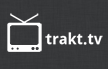
<style>
.page{position:relative;width:108px;height:69px;background:#37383a}
.page>*{position:absolute;margin:0}
.t1{font:15.8px "DroidSans-Bold";color:#ffffff}
</style>
<div class="page">
<p class="t1" style="left:45px;top:32px;width:58px;height:13px">trakt.tv</p>
</div>
